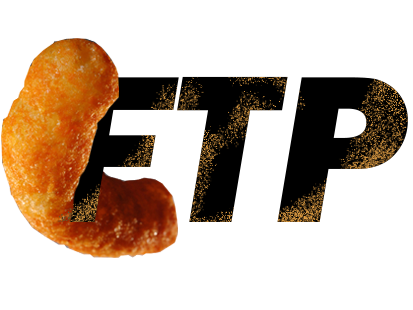
<style>
.page{position:relative;width:413px;height:310px;background:#ffffff}
.page>*{position:absolute;margin:0}
.t1{font:217px "FranklinGothic-HeavyItalic";color:#000000}
</style>
<div class="page">
<p class="t1" style="left:52px;top:76px;width:356px;height:146px">FTP</p>
</div>
